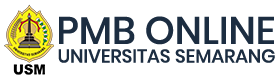
<style>
.page{position:relative;width:280px;height:80px;background:#ffffff}
.page>*{position:absolute;margin:0}
.t1{font:38.2px "Poppins-Medium";color:#1c2d41}
.t2{font:18.6px "Poppins-Medium";color:#1c2d41}
</style>
<div class="page">
<p class="t1" style="left:59px;top:16px;width:215px;height:29px">PMB ONLINE</p>
<p class="t2" style="left:58px;top:49px;width:217px;height:14px">UNIVERSITAS SEMARANG</p>
</div>
